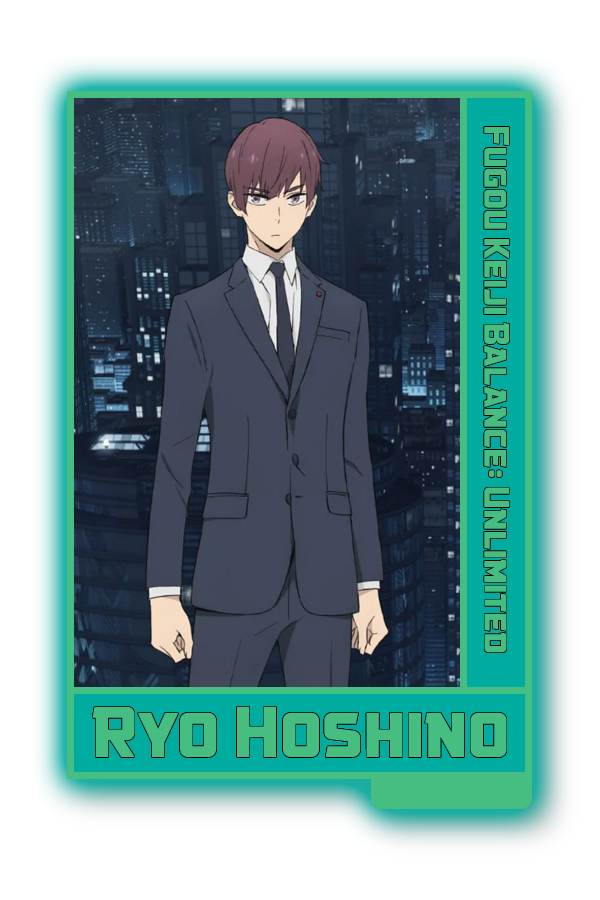
<style>
.page{position:relative;width:600px;height:900px;background:#ffffff}
.page>*{position:absolute;margin:0}
.t1{font:37.3px "GovernmentAgentBB";color:#46bd81}
.t2{font:75px "GovernmentAgentBB";color:#46bd81}
</style>
<div class="page">
<p class="t1" style="left:484px;top:127px;width:26px;height:526px;rotate:90deg">Fugou Keiji Balance: Unlimited</p>
<p class="t2" style="left:92px;top:706px;width:415px;height:51px">Ryo Hoshino</p>
</div>
